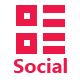
<style>
.page{position:relative;width:80px;height:83px;background:#ffffff}
.page>*{position:absolute;margin:0}
.t1{font:20px "SegoeUI-Bold";color:#ed1847}
</style>
<div class="page">
<p class="t1" style="left:13px;top:58px;width:54px;height:15px">Social</p>
</div>
